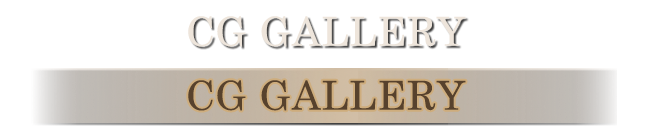
<style>
.page{position:relative;width:656px;height:128px;background:#ffffff}
.page>*{position:absolute;margin:0}
.t1{font:40px "CenturySchoolbook";letter-spacing:0.025em;color:#57422d}
</style>
<div class="page">
<p class="t1" style="left:188px;top:80px;width:278px;height:31px">CG GALLERY</p>
</div>
